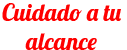
<style>
.page{position:relative;width:127px;height:50px;background:#ffffff}
.page>*{position:absolute;margin:0}
.t1{font:24px "Lobster-Regular";color:#fe0000}
</style>
<div class="page">
<p class="t1" style="left:2px;top:3px;width:119px;height:47px;text-align:center">Cuidado a tu<br>alcance</p>
</div>
